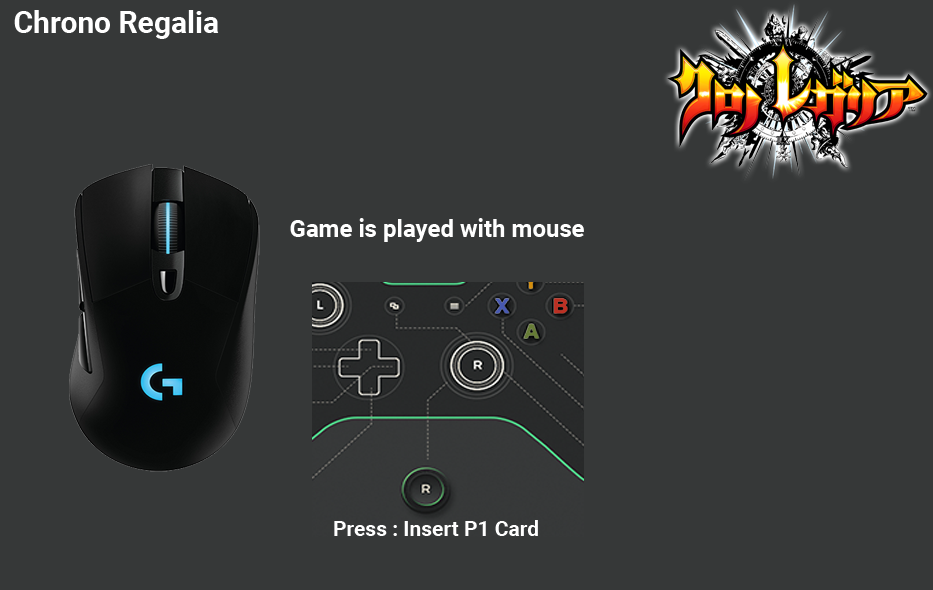
<style>
.page{position:relative;width:933px;height:590px;background:#363838}
.page>*{position:absolute;margin:0}
.t1{font:30px "Roboto-Bold";color:#ffffff}
.t2{font:24px "Roboto-Bold";color:#ffffff}
</style>
<div class="page">
<p class="t1" style="left:14px;top:10px;width:205px;height:29px">Chrono Regalia</p>
<p class="t2" style="left:290px;top:218px;width:294px;height:24px">Game is played with mouse</p>
</div>
